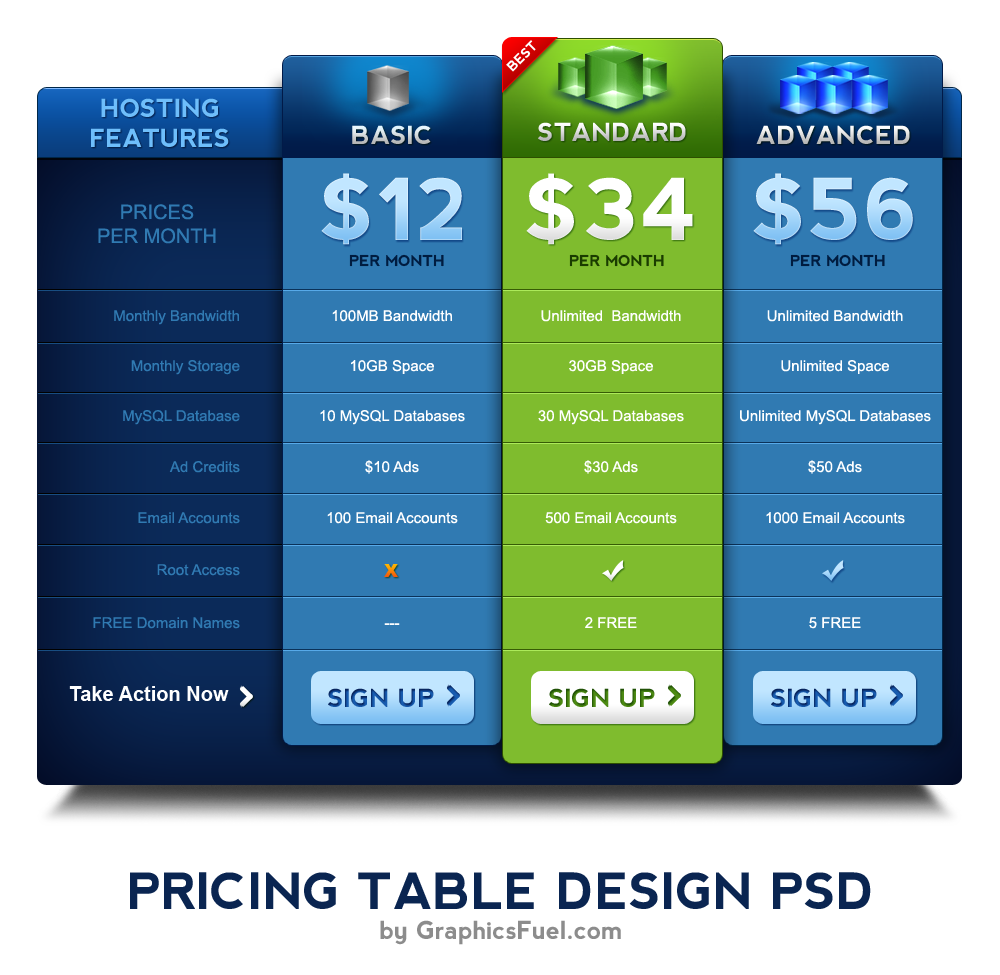
<style>
.page{position:relative;width:1000px;height:975px;background:#ffffff}
.page>*{position:absolute;margin:0}
.t1{font:13px "nevis-Bold";color:#ffffff}
.t2{font:25px "nevis-Bold";color:#6ebefb;text-transform:uppercase}
.t3{font:25px "nevis-Bold";text-transform:uppercase}
.t4{font:85px "nevis-Bold";text-transform:uppercase}
.t5{font:85px "nevis-Bold";color:#ffffff;text-transform:uppercase}
.t6{font:20px "ArialMT";color:#307ab2;text-transform:uppercase}
.t7{font:15px "nevis-Bold";color:#001c40;text-transform:uppercase}
.t8{font:15px "nevis-Bold";color:#1a3c00;text-transform:uppercase}
.t9{font:15px "ArialMT";color:#307ab2}
.t10{font:15px "ArialMT";color:#ffffff}
.t11{font:18px "Arial-Black";text-transform:uppercase}
.t12{font:20px "Arial-BoldMT";color:#ffffff}
.t13{font:50px "nevis-Bold";color:#0a2551;text-transform:uppercase}
.t14{font:25px "nevis-Bold";color:#8c8c8c}
</style>
<div class="page">
<p class="t1" style="left:506px;top:40px;width:30px;height:32px;rotate:-45deg">BEST</p>
<p class="t2" style="left:91px;top:98px;width:138px;height:49px;text-align:center">hosting<br>features</p>
<p class="t3" style="left:352px;top:125px;width:79px;height:19px">basic</p>
<p class="t3" style="left:538px;top:122px;width:148px;height:19px">standard</p>
<p class="t3" style="left:756px;top:125px;width:154px;height:19px">advanced</p>
<p class="t4" style="left:321px;top:173px;width:141px;height:72px">$12</p>
<p class="t5" style="left:526px;top:173px;width:167px;height:72px">$34</p>
<p class="t4" style="left:753px;top:173px;width:160px;height:72px">$56</p>
<p class="t6" style="left:98px;top:204px;width:118px;height:40px;text-align:center">Prices<br>per month</p>
<p class="t7" style="left:349px;top:254px;width:95px;height:13px">per month</p>
<p class="t8" style="left:569px;top:254px;width:95px;height:13px">per month</p>
<p class="t7" style="left:790px;top:254px;width:95px;height:13px">per month</p>
<p class="t9" style="left:114px;top:310px;width:125px;height:15px">Monthly Bandwidth</p>
<p class="t10" style="left:332px;top:310px;width:120px;height:12px">100MB Bandwidth</p>
<p class="t10" style="left:541px;top:310px;width:140px;height:12px">Unlimited  Bandwidth</p>
<p class="t10" style="left:767px;top:310px;width:136px;height:12px">Unlimited Bandwidth</p>
<p class="t9" style="left:131px;top:360px;width:109px;height:15px">Monthly Storage</p>
<p class="t10" style="left:351px;top:360px;width:83px;height:14px">10GB Space</p>
<p class="t10" style="left:569px;top:360px;width:84px;height:14px">30GB Space</p>
<p class="t10" style="left:781px;top:360px;width:108px;height:14px">Unlimited Space</p>
<p class="t9" style="left:123px;top:410px;width:117px;height:15px">MySQL Database</p>
<p class="t10" style="left:320px;top:410px;width:145px;height:15px">10 MySQL Databases</p>
<p class="t10" style="left:538px;top:410px;width:146px;height:15px">30 MySQL Databases</p>
<p class="t10" style="left:740px;top:410px;width:191px;height:15px">Unlimited MySQL Databases</p>
<p class="t9" style="left:169px;top:461px;width:71px;height:12px">Ad Credits</p>
<p class="t10" style="left:365px;top:460px;width:54px;height:14px">$10 Ads</p>
<p class="t10" style="left:584px;top:460px;width:54px;height:14px">$30 Ads</p>
<p class="t10" style="left:808px;top:460px;width:54px;height:14px">$50 Ads</p>
<p class="t9" style="left:138px;top:512px;width:102px;height:12px">Email Accounts</p>
<p class="t10" style="left:327px;top:512px;width:131px;height:12px">100 Email Accounts</p>
<p class="t10" style="left:545px;top:512px;width:132px;height:12px">500 Email Accounts</p>
<p class="t10" style="left:766px;top:512px;width:139px;height:12px">1000 Email Accounts</p>
<p class="t9" style="left:157px;top:564px;width:83px;height:12px">Root Access</p>
<p class="t11" style="left:384px;top:564px;width:14px;height:13px">X</p>
<p class="t9" style="left:93px;top:617px;width:147px;height:12px">FREE Domain Names</p>
<p class="t10" style="left:585px;top:617px;width:52px;height:11px">2 FREE</p>
<p class="t10" style="left:809px;top:617px;width:52px;height:12px">5 FREE</p>
<p class="t10" style="left:384px;top:623px;width:16px;height:2px">---</p>
<p class="t12" style="left:69px;top:686px;width:160px;height:15px">Take Action Now</p>
<p class="t3" style="left:328px;top:688px;width:106px;height:19px">sign up</p>
<p class="t3" style="left:549px;top:688px;width:106px;height:19px">sign up</p>
<p class="t3" style="left:771px;top:688px;width:106px;height:19px">sign up</p>
<p class="t13" style="left:130px;top:872px;width:741px;height:73px;text-align:center">Pricing Table design PSD<br><span class="t14">by GraphicsFuel.com</span></p>
</div>
